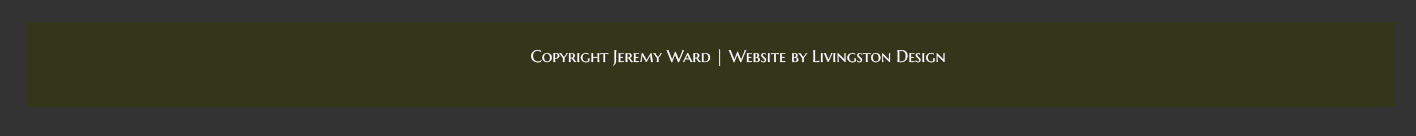
<style>
.page{position:relative;width:1416px;height:136px;background:#33361b}
.page>*{position:absolute;margin:0}
.t1{font:16.7px "MarcellusSC-Regular";color:#fefefe}
</style>
<div class="page">
<p class="t1" style="left:531px;top:49px;width:414px;height:17px">Copyright Jeremy Ward | Website by Livingston Design</p>
</div>
